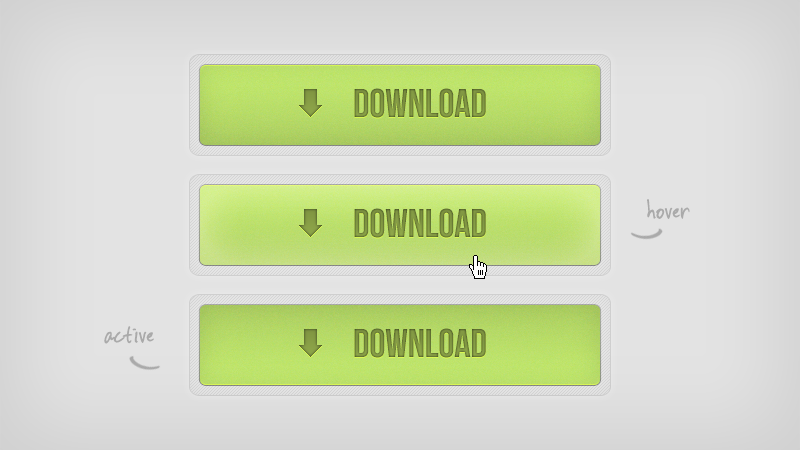
<style>
.page{position:relative;width:800px;height:450px}
.page>*{position:absolute;margin:0}
.t1{font:40px "BebasNeue";color:#788c3d}
.t2{font:30px "VincHand";letter-spacing:-0.075em;color:#aaaaaa}
</style>
<div class="page">
<p class="t1" style="left:354px;top:88px;width:132px;height:30px">Download</p>
<p class="t1" style="left:354px;top:208px;width:132px;height:30px">Download</p>
<p class="t2" style="left:647px;top:199px;width:43px;height:20px">hover</p>
<p class="t2" style="left:104px;top:326px;width:50px;height:18px">active</p>
<p class="t1" style="left:354px;top:328px;width:132px;height:30px">Download</p>
</div>
